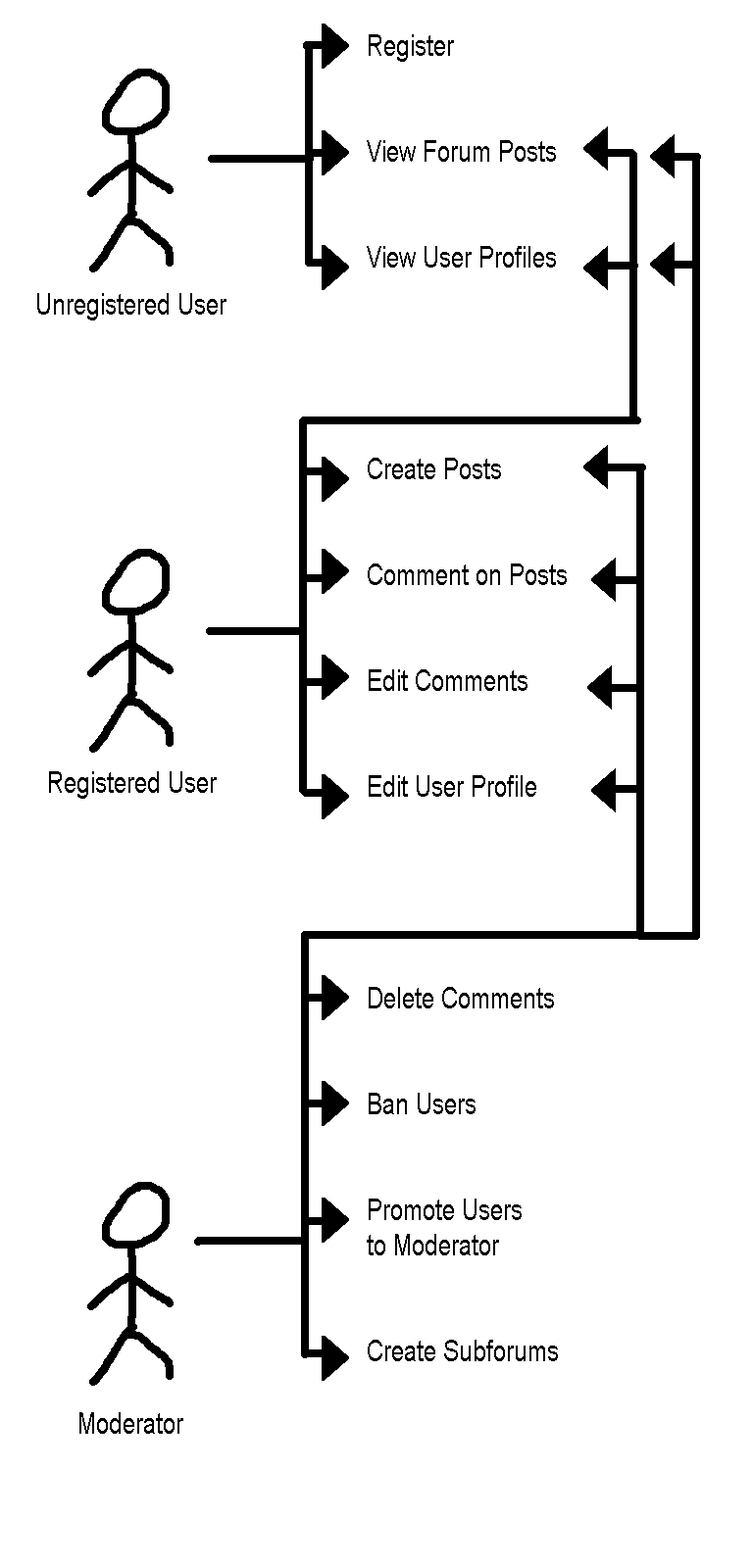
<style>
.page{position:relative;width:753px;height:1568px;background:#ffffff}
.page>*{position:absolute;margin:0}
.t1{font:29.4px "ArialMT";color:#000000;scale:0.8 1}
</style>
<div class="page">
<p class="t1" style="left:367px;top:34px;width:199px;height:1327px">Register<br><br><br>  View Forum Posts<br><br><br>  View User Profiles<br><br><br><br><br><br>  Create Posts<br><br><br>  Comment on Posts<br><br><br>  Edit Comments<br><br><br>  Edit User Profile<br><br><br><br><br><br>  Delete Comments<br><br><br>  Ban Users<br><br><br>  Promote Users<br>  to Moderator<br><br><br>  Create Subforums</p>
</div>
